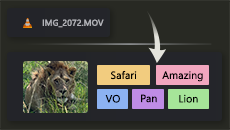
<style>
.page{position:relative;width:230px;height:130px;background:#282923}
.page>*{position:absolute;margin:0}
.t1{font:8.5px "SegoeUI";color:#b2b3b8;font-weight:bold}
.t2{font:10.2px "SegoeUI-Semilight";color:#000000;font-weight:bold}
</style>
<div class="page">
<p class="t1" style="left:42px;top:19px;width:62px;height:9px">IMG_2072.MOV</p>
<p class="t2" style="left:111px;top:70px;width:26px;height:10px">Safari</p>
<p class="t2" style="left:162px;top:71px;width:41px;height:11px">Amazing</p>
<p class="t2" style="left:105px;top:94px;width:15px;height:9px">VO</p>
<p class="t2" style="left:141px;top:94px;width:16px;height:9px">Pan</p>
<p class="t2" style="left:179px;top:94px;width:19px;height:9px">Lion</p>
</div>
